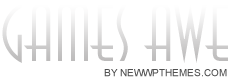
<style>
.page{position:relative;width:230px;height:79px;background:#ffffff}
.page>*{position:absolute;margin:0}
.t1{font:80px "AnnaLightCTT"}
.t2{font:80px "AnnaLightCTT";text-transform:uppercase}
.t3{font:10px "ArialMT";color:#505050;text-transform:uppercase}
</style>
<div class="page">
<p class="t1" style="left:2px;top:3px;width:226px;height:60px"><span class="t2">g</span>ames awe</p>
<p class="t3" style="left:104px;top:69px;width:123px;height:8px">by NewWpThemes.com</p>
</div>
